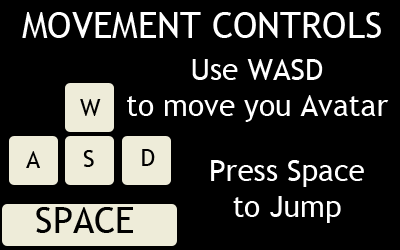
<style>
.page{position:relative;width:400px;height:250px;background:#000000}
.page>*{position:absolute;margin:0}
.t1{font:36px "TrebuchetMS";color:#ffffff}
.t2{font:30px "TrebuchetMS";color:#ffffff}
.t3{font:24px "TrebuchetMS";color:#000000}
.t4{font:36px "TrebuchetMS";color:#000000}
</style>
<div class="page">
<p class="t1" style="left:22px;top:12px;width:359px;height:26px">MOVEMENT CONTROLS</p>
<p class="t2" style="left:127px;top:59px;width:262px;height:63px;text-align:center">Use WASD<br>to move you Avatar</p>
<p class="t3" style="left:80px;top:99px;width:21px;height:17px">W</p>
<p class="t3" style="left:83px;top:150px;width:11px;height:17px">S</p>
<p class="t3" style="left:142px;top:149px;width:13px;height:17px">D</p>
<p class="t3" style="left:26px;top:151px;width:14px;height:17px">A</p>
<p class="t2" style="left:211px;top:160px;width:153px;height:63px;text-align:center">Press Space<br>to Jump</p>
<p class="t4" style="left:36px;top:207px;width:97px;height:26px">SPACE</p>
</div>
